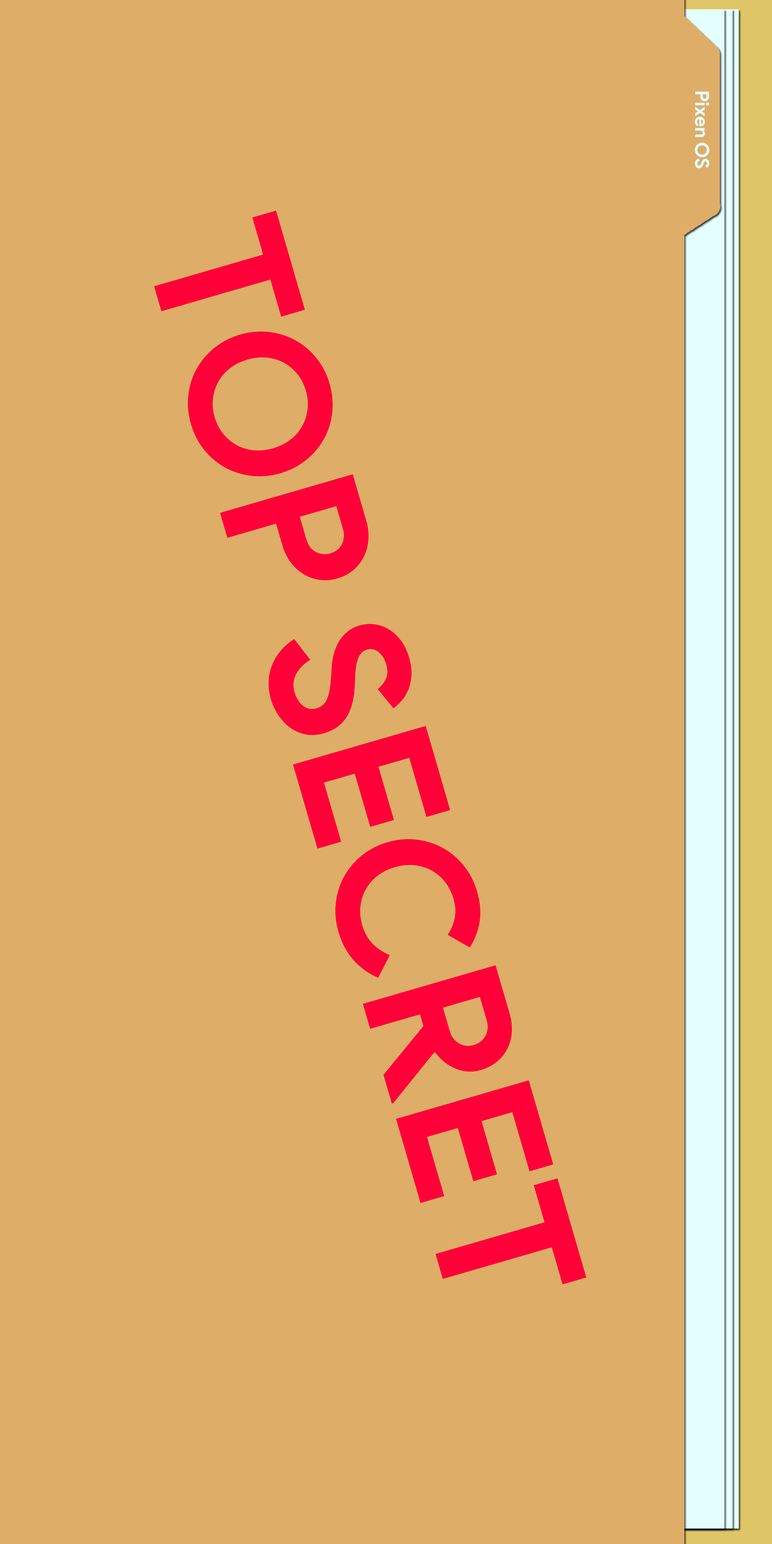
<style>
.page{position:relative;width:772px;height:1544px;background:#dead68}
.page>*{position:absolute;margin:0}
.t1{font:19.3px "ProductSans-Bold";color:#e4ffff}
.t2{font:193px "ProductSans-Bold";color:#ff0038}
</style>
<div class="page">
<p class="t1" style="left:695px;top:91px;width:15px;height:77px;rotate:90deg">Pixen OS</p>
<p class="t2" style="left:154px;top:210px;width:432px;height:1075px;rotate:74deg">TOP SECRET</p>
</div>
